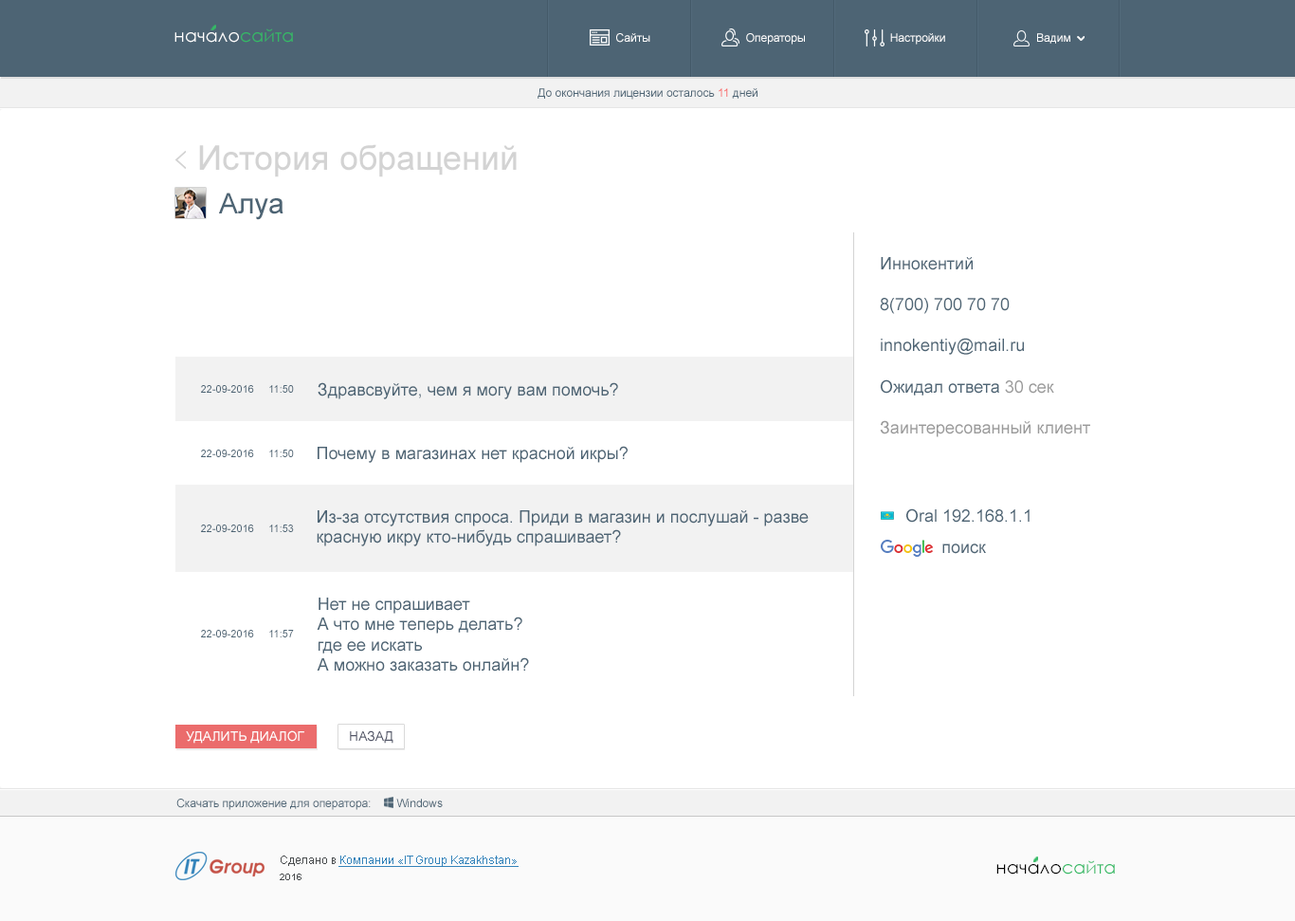
<style>
.page{position:relative;width:1295px;height:921px;background:#ffffff}
.page>*{position:absolute;margin:0}
.t1{font:17.6px "CenturyGothic";color:#ffffff}
.t2{font:17.6px "CenturyGothic";color:#34ba65}
.t3{font:11.4px "ArialMT";color:#ffffff}
.t4{font:11.4px "ArialMT";color:#4d6474}
.t5{font:11.4px "ArialMT";color:#f96969}
.t6{font:34.1px "ArialMT";color:#d3d3d3}
.t7{font:28.4px "ArialMT";color:#4d6474}
.t8{font:17.1px "ArialMT";color:#4d6474}
.t9{font:17.1px "ArialMT";color:#9a9a9a}
.t10{font:10.4px "ArialMT";color:#4d6474}
.t11{font:13.3px "ArialMT";color:#ffffff}
.t12{font:13.3px "ArialMT";color:#515567}
.t13{font:11.4px "ArialMT";color:#3483ba;text-decoration:underline}
.t14{font:11.4px "ArialMT";color:#4a4d4f}
.t15{font:17.6px "CenturyGothic";color:#000000}
.t16{font:9.5px "Arial-BoldMT";color:#4a4d4f}
</style>
<div class="page">
<p class="t1" style="left:174px;top:28px;width:119px;height:15px">начало<span class="t2">сайта</span></p>
<p class="t3" style="left:616px;top:33px;width:34px;height:10px">Сайты</p>
<p class="t3" style="left:746px;top:33px;width:59px;height:12px">Операторы</p>
<p class="t3" style="left:890px;top:33px;width:55px;height:12px">Настройки</p>
<p class="t3" style="left:1037px;top:33px;width:33px;height:11px">Вадим</p>
<p class="t4" style="left:538px;top:88px;width:220px;height:12px">До окончания лицензии осталось <span class="t5">11</span> дней</p>
<p class="t6" style="left:199px;top:144px;width:318px;height:33px">История обращений</p>
<p class="t7" style="left:219px;top:192px;width:65px;height:28px">Алуа</p>
<p class="t8" style="left:880px;top:257px;width:210px;height:180px">Иннокентий<br><br>8(700) 700 70 70<br><br>innokentiy@mail.ru<br><br>Ожидал ответа <span class="t9">30 сек<br><br>Заинтересованный клиент</span></p>
<p class="t10" style="left:201px;top:385px;width:93px;height:8px">22-09-2016     11:50</p>
<p class="t8" style="left:318px;top:382px;width:300px;height:17px">Здравсвуйте, чем я могу вам помочь?</p>
<p class="t10" style="left:201px;top:449px;width:93px;height:8px">22-09-2016     11:50</p>
<p class="t8" style="left:318px;top:446px;width:310px;height:17px">Почему в магазинах нет красной икры?</p>
<p class="t8" style="left:906px;top:508px;width:124px;height:14px">Oral 192.168.1.1</p>
<p class="t8" style="left:317px;top:510px;width:492px;height:36px">Из-за отсутствия спроса. Приди в магазин и послушай - разве <br>красную икру кто-нибудь спрашивает?</p>
<p class="t10" style="left:201px;top:524px;width:93px;height:8px">22-09-2016     11:53</p>
<p class="t8" style="left:942px;top:543px;width:44px;height:11px">поиск</p>
<p class="t8" style="left:317px;top:597px;width:212px;height:74px">Нет не спрашивает<br>А что мне теперь делать?<br>где ее искать<br>А можно заказать онлайн?</p>
<p class="t10" style="left:201px;top:630px;width:93px;height:7px">22-09-2016     11:57</p>
<p class="t11" style="left:186px;top:730px;width:118px;height:13px">УДАЛИТЬ ДИАЛОГ</p>
<p class="t12" style="left:350px;top:730px;width:43px;height:13px">НАЗАД</p>
<p class="t4" style="left:176px;top:798px;width:267px;height:12px">Скачать приложение для оператора:        Windows</p>
<p class="t13" style="left:281px;top:855px;width:238px;height:12px"><span class="t14">Сделано в </span>Компании «IT Group Kazakhstan»</p>
<p class="t15" style="left:997px;top:860px;width:118px;height:14px">начало<span class="t2">сайта</span></p>
<p class="t16" style="left:280px;top:873px;width:22px;height:7px">2016</p>
</div>
